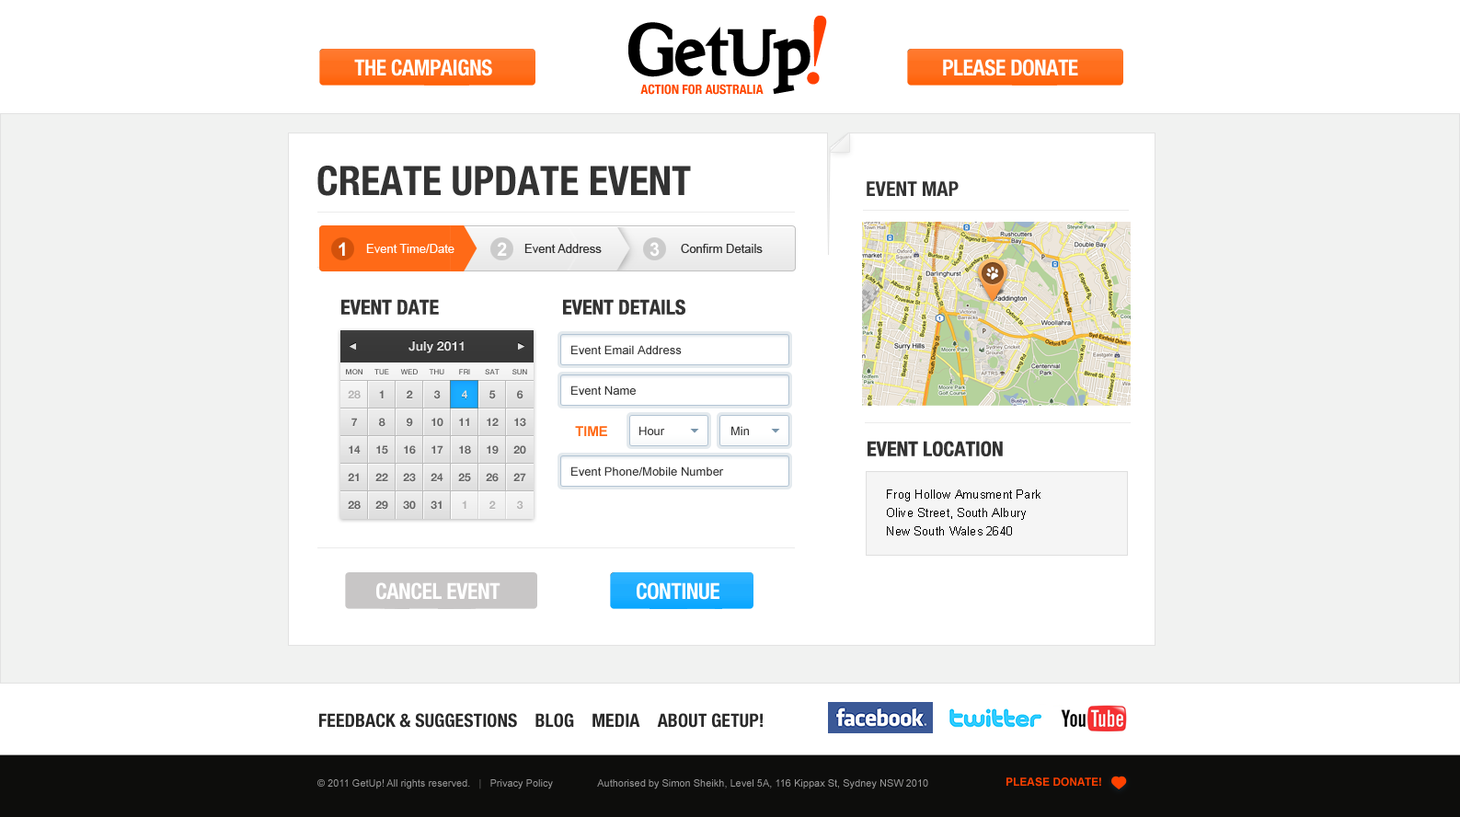
<style>
.page{position:relative;width:1460px;height:817px;background:#ffffff}
.page>*{position:absolute;margin:0}
.t1{font:22.1px "HelveticaNeue-CondensedBold";letter-spacing:-0.025em;color:#ffffff;text-transform:uppercase}
.t2{font:12.9px "HelveticaNeue-CondensedBold";color:#ff4800;text-transform:uppercase}
.t3{font:40.5px "HelveticaNeue-CondensedBold";color:#333333;text-transform:uppercase}
.t4{font:20.2px "HelveticaNeue-CondensedBold";color:#333333;text-transform:uppercase}
.t5{font:18.4px "Arial-BoldMT";letter-spacing:-0.05em;color:#ffffff}
.t6{font:12px "ArialMT";color:#ffffff}
.t7{font:12px "ArialMT";color:#333333}
.t8{font:12.9px "HelveticaNeue-Bold";color:#e0e0e0}
.t9{font:7.4px "HelveticaNeue-Medium";color:#666666;text-transform:uppercase}
.t10{font:11px "HelveticaNeue-Bold";color:#b4b3b3}
.t11{font:11px "HelveticaNeue-Bold";color:#666666}
.t12{font:11px "HelveticaNeue-Bold";color:#e0e0e0}
.t13{font:13.8px "Arial-BoldMT";color:#ff6a17;text-transform:uppercase}
.t14{font:12px/18.4px "ArialMT";letter-spacing:0.01em;color:#000000}
.t15{font:18.4px "HelveticaNeue-CondensedBold";color:#292929;text-transform:uppercase}
.t16{font:10.1px "ArialMT";color:#999999}
.t17{font:10.1px "ArialMT";color:#666666}
.t18{font:11px "Arial-BoldMT";color:#ff4000;text-transform:uppercase}
</style>
<div class="page">
<p class="t1" style="left:354px;top:59px;width:138px;height:17px">The campaigns</p>
<p class="t1" style="left:943px;top:59px;width:135px;height:17px">Please Donate</p>
<p class="t2" style="left:640px;top:84px;width:123px;height:11px">Action for Australia</p>
<p class="t3" style="left:317px;top:166px;width:374px;height:30px">create update event</p>
<p class="t4" style="left:867px;top:181px;width:91px;height:15px">EVENT map</p>
<p class="t5" style="left:339px;top:242px;width:6px;height:14px">1</p>
<p class="t6" style="left:366px;top:244px;width:88px;height:9px">Event Time/Date</p>
<p class="t5" style="left:497px;top:242px;width:10px;height:14px">2</p>
<p class="t7" style="left:524px;top:244px;width:78px;height:9px">Event Address</p>
<p class="t5" style="left:649px;top:242px;width:11px;height:15px">3</p>
<p class="t7" style="left:681px;top:244px;width:82px;height:9px">Confirm Details</p>
<p class="t4" style="left:341px;top:299px;width:98px;height:16px">event date</p>
<p class="t4" style="left:563px;top:299px;width:122px;height:16px">event details</p>
<p class="t8" style="left:408px;top:341px;width:56px;height:12px">July 2011</p>
<p class="t7" style="left:571px;top:345px;width:111px;height:9px">Event Email Address</p>
<p class="t9" style="left:346px;top:369px;width:16px;height:5px">Mon</p>
<p class="t9" style="left:374px;top:369px;width:15px;height:5px">Tue</p>
<p class="t9" style="left:400px;top:369px;width:18px;height:5px">Wed</p>
<p class="t9" style="left:429px;top:369px;width:15px;height:5px">Thu</p>
<p class="t9" style="left:459px;top:369px;width:11px;height:5px">Fri</p>
<p class="t9" style="left:485px;top:369px;width:14px;height:5px">Sat</p>
<p class="t9" style="left:512px;top:369px;width:15px;height:5px">Sun</p>
<p class="t7" style="left:571px;top:385px;width:65px;height:10px">Event Name</p>
<p class="t10" style="left:348px;top:390px;width:13px;height:9px">28</p>
<p class="t11" style="left:379px;top:390px;width:5px;height:8px">1</p>
<p class="t11" style="left:407px;top:390px;width:6px;height:8px">2</p>
<p class="t11" style="left:434px;top:390px;width:7px;height:9px">3</p>
<p class="t12" style="left:462px;top:390px;width:5px;height:8px">4</p>
<p class="t11" style="left:489px;top:390px;width:7px;height:9px">5</p>
<p class="t11" style="left:517px;top:390px;width:6px;height:9px">6</p>
<p class="t11" style="left:351px;top:418px;width:6px;height:8px">7</p>
<p class="t11" style="left:379px;top:418px;width:6px;height:9px">8</p>
<p class="t11" style="left:407px;top:418px;width:6px;height:9px">9</p>
<p class="t11" style="left:431px;top:418px;width:12px;height:9px">10</p>
<p class="t11" style="left:459px;top:418px;width:10px;height:8px">11</p>
<p class="t11" style="left:487px;top:418px;width:12px;height:8px">12</p>
<p class="t11" style="left:514px;top:418px;width:12px;height:9px">13</p>
<p class="t13" style="left:575px;top:426px;width:32px;height:10px">Time</p>
<p class="t7" style="left:639px;top:426px;width:26px;height:9px">Hour</p>
<p class="t7" style="left:731px;top:426px;width:18px;height:9px">Min</p>
<p class="t11" style="left:349px;top:445px;width:12px;height:8px">14</p>
<p class="t11" style="left:376px;top:445px;width:12px;height:9px">15</p>
<p class="t11" style="left:404px;top:445px;width:12px;height:9px">16</p>
<p class="t11" style="left:431px;top:445px;width:12px;height:8px">17</p>
<p class="t11" style="left:459px;top:445px;width:12px;height:9px">18</p>
<p class="t11" style="left:487px;top:445px;width:12px;height:9px">19</p>
<p class="t11" style="left:513px;top:445px;width:13px;height:9px">20</p>
<p class="t4" style="left:867px;top:441px;width:136px;height:15px">event location</p>
<p class="t11" style="left:348px;top:473px;width:11px;height:8px">21</p>
<p class="t11" style="left:375px;top:473px;width:13px;height:8px">22</p>
<p class="t11" style="left:403px;top:473px;width:13px;height:9px">23</p>
<p class="t11" style="left:430px;top:473px;width:13px;height:8px">24</p>
<p class="t11" style="left:458px;top:473px;width:13px;height:9px">25</p>
<p class="t11" style="left:486px;top:473px;width:13px;height:9px">26</p>
<p class="t11" style="left:513px;top:473px;width:13px;height:8px">27</p>
<p class="t7" style="left:571px;top:466px;width:153px;height:10px">Event Phone/Mobile Number</p>
<p class="t14" style="left:887px;top:489px;width:153px;height:46px">Frog Hollow Amusment Park<br>Olive Street, South Albury<br>New South Wales 2640</p>
<p class="t11" style="left:348px;top:500px;width:13px;height:10px">28</p>
<p class="t11" style="left:375px;top:500px;width:13px;height:10px">29</p>
<p class="t11" style="left:403px;top:500px;width:13px;height:10px">30</p>
<p class="t11" style="left:430px;top:500px;width:12px;height:10px">31</p>
<p class="t10" style="left:462px;top:500px;width:4px;height:9px">1</p>
<p class="t10" style="left:489px;top:500px;width:7px;height:9px">2</p>
<p class="t10" style="left:517px;top:500px;width:6px;height:10px">3</p>
<p class="t1" style="left:376px;top:582px;width:124px;height:18px">cancel event</p>
<p class="t1" style="left:637px;top:582px;width:82px;height:18px">Continue</p>
<p class="t15" style="left:319px;top:713px;width:444px;height:15px">feedback &amp; suggestions    blog    Media    about getup!</p>
<p class="t16" style="left:317px;top:779px;width:611px;height:10px">© 2011 GetUp! All rights reserved.  <span class="t17"> |   </span>Privacy Policy                Authorised by Simon Sheikh, Level 5A, 116 Kippax St, Sydney NSW 2010</p>
<p class="t18" style="left:1006px;top:777px;width:95px;height:9px">please donate!</p>
</div>
